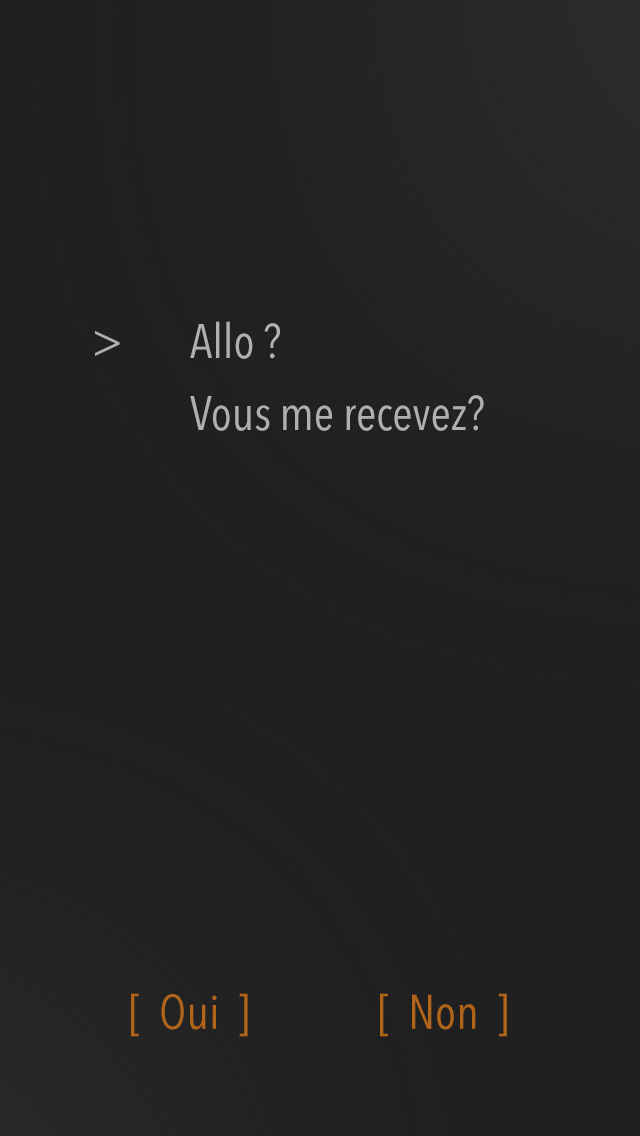
<style>
.page{position:relative;width:640px;height:1136px;background:#202020}
.page>*{position:absolute;margin:0}
.t1{font:48px/36px "AvenirNextCondensed-Regular";color:#b0b0b0}
.t2{font:48px "AvenirNextCondensed-Regular";color:#b0b0b0}
.t3{font:48px "AvenirNextCondensed-Regular";color:#b0641a}
</style>
<div class="page">
<p class="t1" style="left:190px;top:321px;width:294px;height:110px">Allo ? <br><br>Vous me recevez?</p>
<p class="t2" style="left:95px;top:330px;width:25px;height:26px">&gt;</p>
<p class="t3" style="left:131px;top:993px;width:117px;height:44px">[  Oui  ]</p>
<p class="t3" style="left:380px;top:993px;width:127px;height:44px">[  Non  ]</p>
</div>
